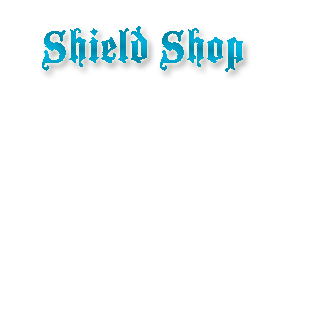
<style>
.page{position:relative;width:311px;height:315px;background:#ffffff}
.page>*{position:absolute;margin:0}
.t1{font:48px "BlackmoorLetPlain";color:#009dc4}
</style>
<div class="page">
<p class="t1" style="left:42px;top:26px;width:201px;height:46px">Shield Shop</p>
</div>
